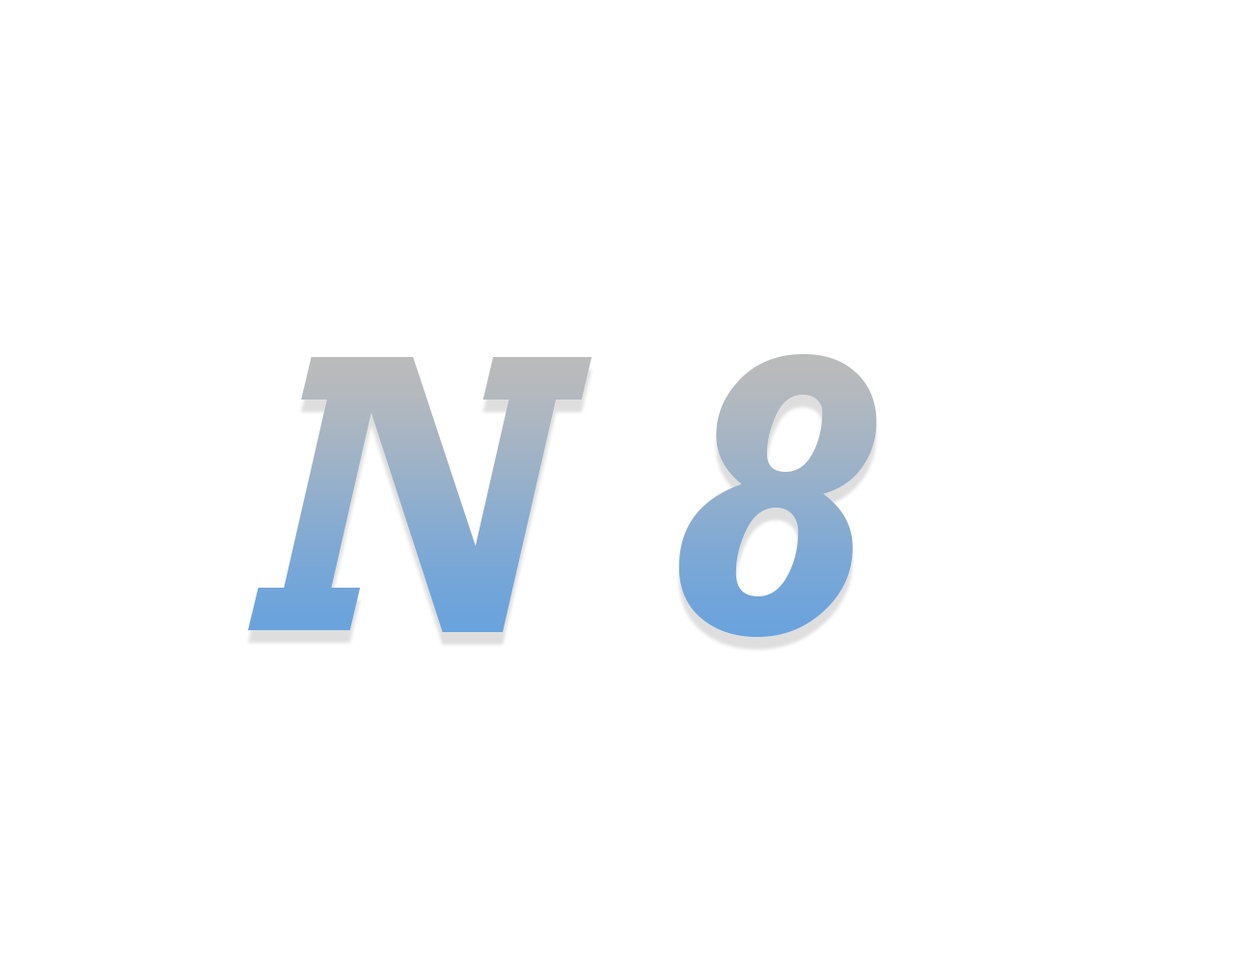
<style>
.page{position:relative;width:1235px;height:965px;background:#ffffff}
.page>*{position:absolute;margin:0}
.t1{font:402.2px "Rockwell-BoldItalic"}
</style>
<div class="page">
<p class="t1" style="left:248px;top:357px;width:345px;height:275px">N</p>
<p class="t1" style="left:679px;top:354px;width:198px;height:283px">8</p>
</div>
